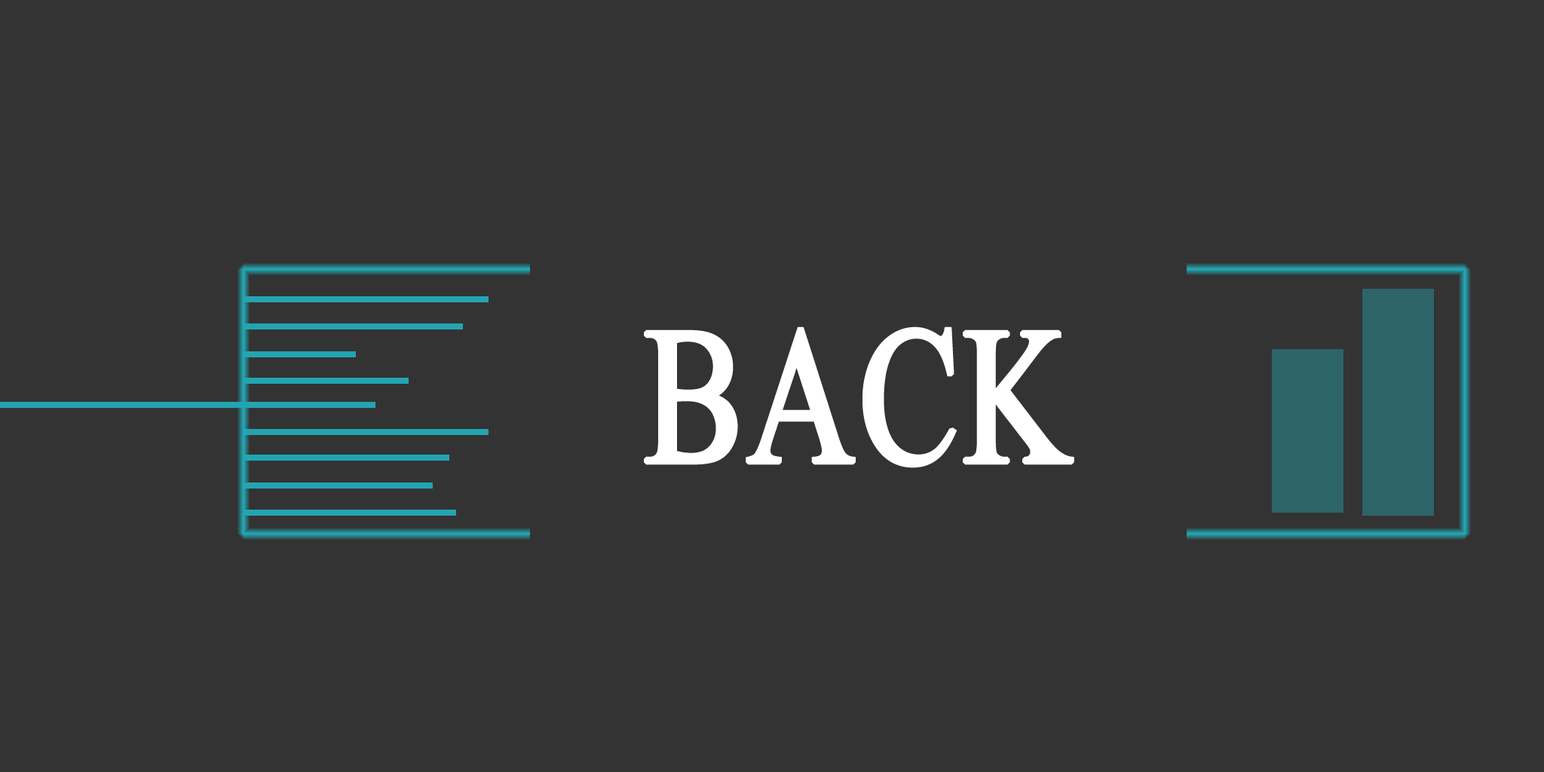
<style>
.page{position:relative;width:1544px;height:772px;background:#333333}
.page>*{position:absolute;margin:0}
.t1{font:195.5px "TimesNewRomanPSMT";color:#ffffff;font-weight:bold;scale:0.76 1}
</style>
<div class="page">
<p class="t1" style="left:644px;top:327px;width:431px;height:141px">BACK</p>
</div>
